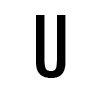
<style>
.page{position:relative;width:100px;height:100px;background:#ffffff}
.page>*{position:absolute;margin:0}
.t1{font:100px "TwCenMT-Condensed";color:#000000}
</style>
<div class="page">
<p class="t1" style="left:36px;top:15px;width:30px;height:63px">U</p>
</div>
